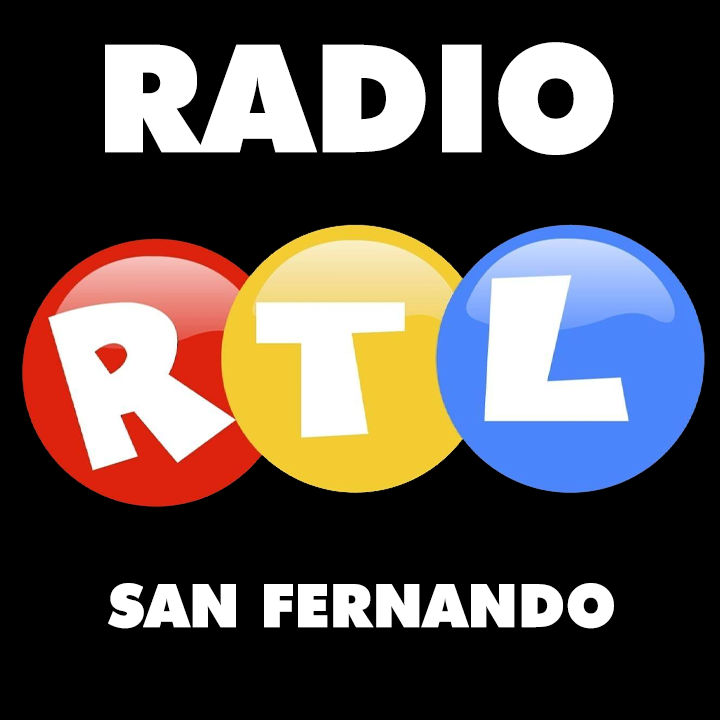
<style>
.page{position:relative;width:720px;height:720px;background:#000000}
.page>*{position:absolute;margin:0}
.t1{font:150px "FuturaBT-ExtraBlack";color:#ffffff;text-transform:uppercase}
.t2{font:60px "FuturaBT-ExtraBlack";color:#ffffff;text-transform:uppercase}
</style>
<div class="page">
<p class="t1" style="left:105px;top:42px;width:509px;height:113px">RADIO</p>
<p class="t2" style="left:108px;top:583px;width:506px;height:46px">San Fernando</p>
</div>
